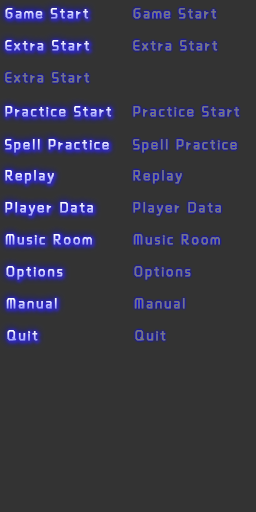
<style>
.page{position:relative;width:256px;height:512px;background:#333333}
.page>*{position:absolute;margin:0}
.t1{font:14px "MFShangHei_Noncommercial-Regular";letter-spacing:0.15em;font-weight:bold}
.t2{font:14px "MFShangHei_Noncommercial-Regular";letter-spacing:0.15em;color:#777777;font-weight:bold}
</style>
<div class="page">
<p class="t1" style="left:5px;top:8px;width:84px;height:11px">Game Start</p>
<p class="t2" style="left:133px;top:8px;width:84px;height:11px">Game Start</p>
<p class="t1" style="left:5px;top:40px;width:85px;height:11px">Extra Start</p>
<p class="t2" style="left:133px;top:40px;width:85px;height:11px">Extra Start</p>
<p class="t2" style="left:5px;top:72px;width:85px;height:11px">Extra Start</p>
<p class="t1" style="left:5px;top:106px;width:107px;height:11px">Practice Start</p>
<p class="t2" style="left:133px;top:106px;width:107px;height:11px">Practice Start</p>
<p class="t1" style="left:5px;top:139px;width:104px;height:14px">Spell Practice</p>
<p class="t2" style="left:133px;top:139px;width:104px;height:14px">Spell Practice</p>
<p class="t1" style="left:5px;top:170px;width:49px;height:14px">Replay</p>
<p class="t2" style="left:133px;top:170px;width:49px;height:14px">Replay</p>
<p class="t1" style="left:5px;top:202px;width:88px;height:14px">Player Data</p>
<p class="t2" style="left:133px;top:202px;width:88px;height:14px">Player Data</p>
<p class="t1" style="left:5px;top:234px;width:87px;height:11px">Music Room</p>
<p class="t2" style="left:133px;top:234px;width:87px;height:11px">Music Room</p>
<p class="t1" style="left:6px;top:266px;width:57px;height:14px">Options</p>
<p class="t2" style="left:134px;top:266px;width:57px;height:14px">Options</p>
<p class="t1" style="left:6px;top:298px;width:51px;height:11px">Manual</p>
<p class="t2" style="left:134px;top:298px;width:51px;height:11px">Manual</p>
<p class="t1" style="left:7px;top:330px;width:31px;height:11px">Quit</p>
<p class="t2" style="left:135px;top:330px;width:31px;height:11px">Quit</p>
</div>
